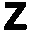
<style>
.page{position:relative;width:32px;height:32px;background:#ffffff}
.page>*{position:absolute;margin:0}
.t1{font:48px "CourierPrimeSans-Bold";color:#020202}
</style>
<div class="page">
<p class="t1" style="left:4px;top:2px;width:23px;height:28px">Z</p>
</div>
